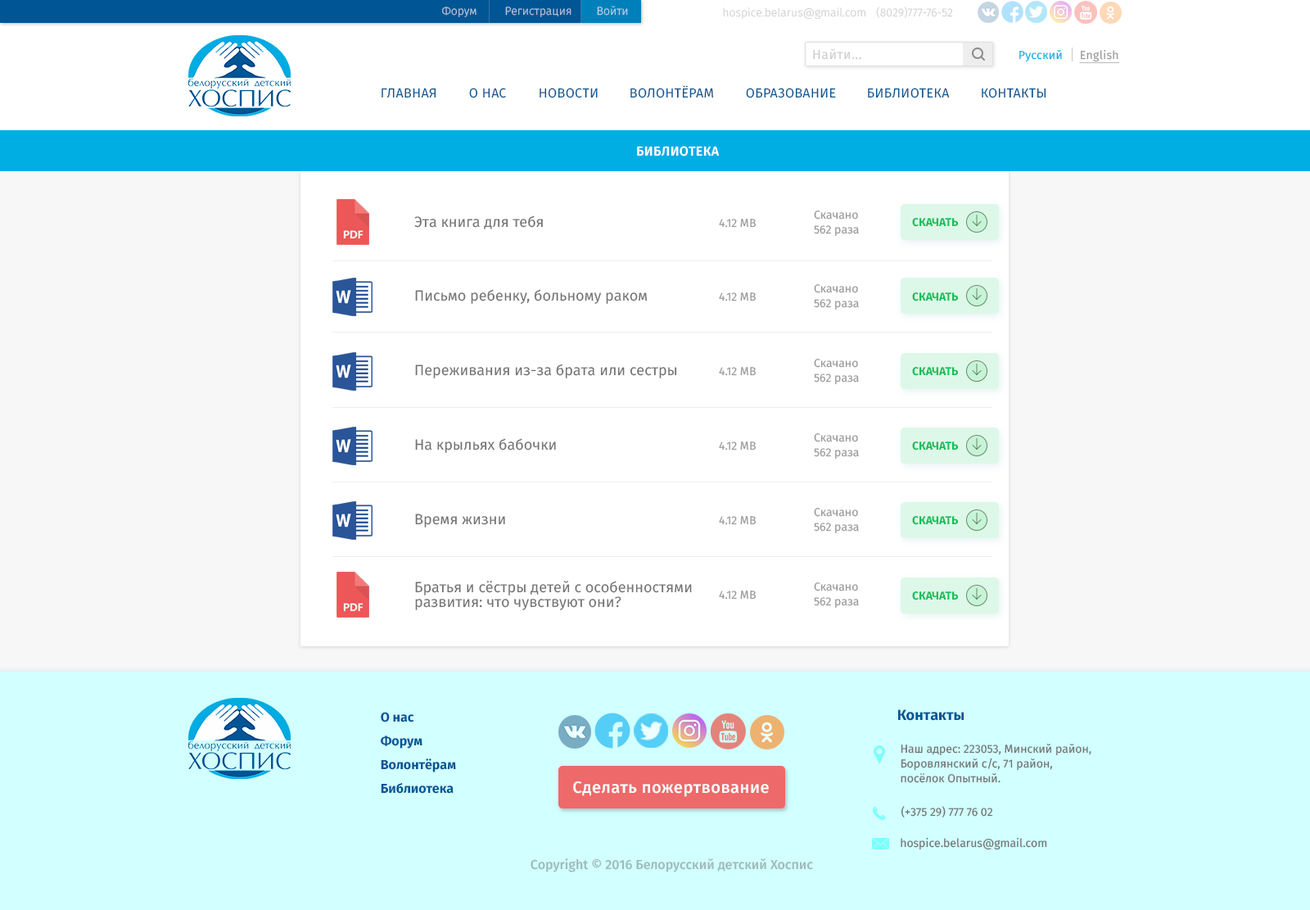
<style>
.page{position:relative;width:1310px;height:910px;background:#ffffff}
.page>*{position:absolute;margin:0}
.t1{font:11.5px "FiraSans-Light";color:#b8c6d9}
.t2{font:11.5px "FiraSans-Light";color:#b8d2e5}
.t3{font:11.5px "FiraSans-Light";color:#d1d1d1}
.t4{font:11.5px "FiraSans-Light"}
.t5{font:13.1px "FiraSans-Regular";letter-spacing:0.025em;color:#cdcdcd}
.t6{font:11.5px "FiraSans-Regular";letter-spacing:0.025em;color:#00ace1}
.t7{font:11.5px "FiraSans-Regular";letter-spacing:0.025em;color:#999999;text-decoration:underline}
.t8{font:13.1px "FiraSans-Regular";letter-spacing:0.025em;color:#095691;text-transform:uppercase}
.t9{font:13.1px "FiraSans-Medium";letter-spacing:0.025em;color:#ffffff;text-transform:uppercase}
.t10{font:14.7px "FiraSans-Regular";color:#727272}
.t11{font:11.5px "FiraSans-Regular";color:#999999}
.t12{font:11.5px/14.7px "FiraSans-Regular";color:#999999}
.t13{font:11.5px "FiraSans-Bold";color:#18be5a}
.t14{font:14.7px/14.7px "FiraSans-Regular";color:#727272}
.t15{font:13.1px "FiraSans-Bold";color:#005595}
.t16{font:14.7px "FiraSans-Bold";color:#005595}
.t17{font:11.5px/14.7px "FiraSans-Regular";color:#727272}
.t18{font:16.4px "FiraSans-Medium";letter-spacing:0.025em;color:#ffffff}
.t19{font:11.5px "FiraSans-Regular";color:#727272}
.t20{font:13.1px "FiraSans-Medium";color:#9fbaba}
</style>
<div class="page">
<p class="t1" style="left:442px;top:6px;width:35px;height:11px">Форум</p>
<p class="t2" style="left:597px;top:6px;width:31px;height:10px">Войти</p>
<p class="t1" style="left:505px;top:7px;width:67px;height:10px">Регистрация</p>
<p class="t3" style="left:723px;top:7px;width:143px;height:12px">hospice.belarus@gmail.com</p>
<p class="t4" style="left:876px;top:7px;width:77px;height:11px">(8029)777-76-52</p>
<p class="t5" style="left:813px;top:48px;width:49px;height:12px">Найти...</p>
<p class="t6" style="left:1020px;top:50px;width:42px;height:12px">Русский</p>
<p class="t7" style="left:1079px;top:49px;width:41px;height:15px">English</p>
<p class="t8" style="left:382px;top:88px;width:55px;height:10px">Главная</p>
<p class="t8" style="left:469px;top:88px;width:37px;height:10px">о нас</p>
<p class="t8" style="left:540px;top:88px;width:58px;height:10px">новости</p>
<p class="t8" style="left:631px;top:85px;width:83px;height:13px">Волонтёрам</p>
<p class="t8" style="left:746px;top:88px;width:90px;height:10px">образование</p>
<p class="t8" style="left:868px;top:88px;width:82px;height:10px">Библиотека</p>
<p class="t8" style="left:982px;top:88px;width:65px;height:10px">КОнтакты</p>
<p class="t9" style="left:637px;top:146px;width:82px;height:10px">библиотека</p>
<p class="t10" style="left:414px;top:215px;width:129px;height:14px">Эта книга для тебя</p>
<p class="t11" style="left:719px;top:219px;width:38px;height:9px">4.12 MB</p>
<p class="t12" style="left:814px;top:210px;width:45px;height:27px">Скачано<br>562 раза</p>
<p class="t13" style="left:912px;top:218px;width:46px;height:9px">СКАЧАТЬ</p>
<p class="t10" style="left:415px;top:289px;width:233px;height:15px">Письмо ребенку, больному раком</p>
<p class="t11" style="left:719px;top:292px;width:38px;height:9px">4.12 MB</p>
<p class="t12" style="left:814px;top:284px;width:45px;height:26px">Скачано<br>562 раза</p>
<p class="t13" style="left:912px;top:292px;width:46px;height:9px">СКАЧАТЬ</p>
<p class="t10" style="left:415px;top:364px;width:262px;height:14px">Переживания из-за брата или сестры</p>
<p class="t12" style="left:814px;top:359px;width:45px;height:26px">Скачано<br>562 раза</p>
<p class="t11" style="left:719px;top:367px;width:38px;height:9px">4.12 MB</p>
<p class="t13" style="left:912px;top:367px;width:46px;height:9px">СКАЧАТЬ</p>
<p class="t12" style="left:814px;top:433px;width:45px;height:26px">Скачано<br>562 раза</p>
<p class="t10" style="left:415px;top:438px;width:141px;height:15px">На крыльях бабочки</p>
<p class="t11" style="left:719px;top:441px;width:38px;height:9px">4.12 MB</p>
<p class="t13" style="left:912px;top:441px;width:46px;height:9px">СКАЧАТЬ</p>
<p class="t12" style="left:814px;top:508px;width:45px;height:26px">Скачано<br>562 раза</p>
<p class="t10" style="left:415px;top:514px;width:90px;height:13px">Время жизни</p>
<p class="t11" style="left:719px;top:516px;width:38px;height:9px">4.12 MB</p>
<p class="t13" style="left:912px;top:516px;width:46px;height:9px">СКАЧАТЬ</p>
<p class="t14" style="left:415px;top:581px;width:277px;height:29px">Братья и сёстры детей с особенностями развития: что чувствуют они?</p>
<p class="t11" style="left:719px;top:591px;width:38px;height:9px">4.12 MB</p>
<p class="t12" style="left:814px;top:582px;width:45px;height:27px">Скачано<br>562 раза</p>
<p class="t13" style="left:912px;top:591px;width:46px;height:9px">СКАЧАТЬ</p>
<p class="t15" style="left:381px;top:712px;width:33px;height:10px">О нас</p>
<p class="t16" style="left:898px;top:709px;width:66px;height:12px">Контакты</p>
<p class="t15" style="left:381px;top:735px;width:42px;height:14px">Форум</p>
<p class="t17" style="left:901px;top:744px;width:191px;height:39px">Наш адрес: 223053, Минский район,<br>Боровлянский с/c, 71 район, <br>посёлок Опытный.</p>
<p class="t15" style="left:381px;top:758px;width:75px;height:14px">Волонтёрам</p>
<p class="t15" style="left:381px;top:783px;width:73px;height:11px">Библиотека</p>
<p class="t18" style="left:573px;top:781px;width:196px;height:16px">Сделать пожертвование</p>
<p class="t19" style="left:901px;top:806px;width:92px;height:12px">(+375 29) 777 76 02</p>
<p class="t19" style="left:901px;top:837px;width:147px;height:13px">hospice.belarus@gmail.com</p>
<p class="t20" style="left:531px;top:858px;width:282px;height:14px">Copyright © 2016 Белорусский детский Хоспис</p>
</div>
